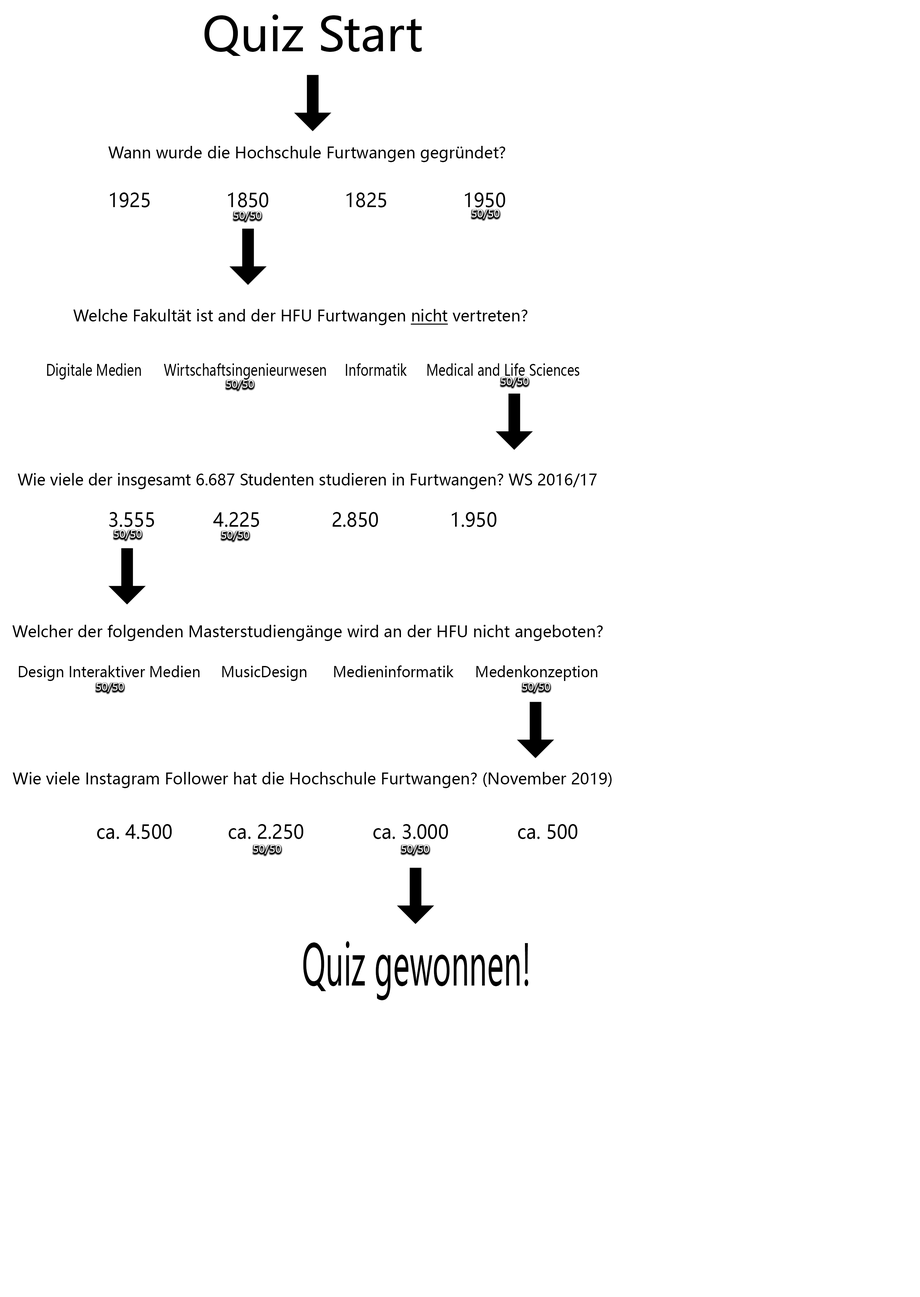
<style>
.page{position:relative;width:920px;height:1297px;background:#ffffff}
.page>*{position:absolute;margin:0}
.t1{font:46.6px "MicrosoftYaHeiUI";color:#000000}
.t2{font:15.6px "MicrosoftYaHeiUI";color:#000000}
.t3{font:19px "MicrosoftYaHeiUI";color:#000000;scale:0.96 1}
.t4{font:10.4px "MicrosoftYaHeiUI";color:#ffffff}
.t5{font:15.6px "MicrosoftYaHeiUI";color:#000000;text-decoration:underline}
.t6{font:15.6px "MicrosoftYaHeiUI";color:#000000;scale:0.81 1}
.t7{font:14.7px "MicrosoftYaHeiUI";color:#000000;scale:0.96 1}
.t8{font:56.3px "MicrosoftYaHeiUI";color:#000000;scale:0.52 1}
</style>
<div class="page">
<p class="t1" style="left:204px;top:14px;width:218px;height:42px">Quiz Start</p>
<p class="t2" style="left:108px;top:146px;width:397px;height:16px">Wann wurde die Hochschule Furtwangen gegründet?</p>
<p class="t3" style="left:110px;top:192px;width:395px;height:15px">1925       1850       1825       1950</p>
<p class="t4" style="left:472px;top:210px;width:27px;height:9px">50/50</p>
<p class="t4" style="left:234px;top:211px;width:27px;height:10px">50/50</p>
<p class="t2" style="left:73px;top:309px;width:454px;height:16px">Welche Fakultät ist and der HFU Furtwangen <span class="t5">nicht</span> vertreten?</p>
<p class="t6" style="left:47px;top:363px;width:532px;height:16px">Digitale Medien   Wirtschaftsingenieurwesen   Informatik   Medical and Life Sciences</p>
<p class="t4" style="left:501px;top:377px;width:27px;height:9px">50/50</p>
<p class="t4" style="left:226px;top:380px;width:28px;height:9px">50/50</p>
<p class="t2" style="left:17px;top:473px;width:580px;height:16px">Wie viele der insgesamt 6.687 Studenten studieren in Furtwangen? WS 2016/17</p>
<p class="t3" style="left:109px;top:512px;width:387px;height:15px">3.555     4.225       2.850       1.950</p>
<p class="t4" style="left:114px;top:530px;width:27px;height:9px">50/50</p>
<p class="t4" style="left:221px;top:531px;width:28px;height:9px">50/50</p>
<p class="t2" style="left:12px;top:625px;width:590px;height:16px">Welcher der folgenden Masterstudiengänge wird an der HFU nicht angeboten?</p>
<p class="t7" style="left:19px;top:665px;width:578px;height:16px">Design Interaktiver Medien   MusicDesign   Medieninformatik   Medenkonzeption</p>
<p class="t4" style="left:96px;top:683px;width:28px;height:9px">50/50</p>
<p class="t4" style="left:522px;top:683px;width:28px;height:9px">50/50</p>
<p class="t2" style="left:12px;top:772px;width:599px;height:16px">Wie viele Instagram Follower hat die Hochschule Furtwangen? (November 2019)</p>
<p class="t3" style="left:97px;top:824px;width:480px;height:15px">ca. 4.500     ca. 2.250       ca. 3.000       ca. 500</p>
<p class="t4" style="left:253px;top:845px;width:28px;height:9px">50/50</p>
<p class="t4" style="left:401px;top:845px;width:28px;height:9px">50/50</p>
<p class="t8" style="left:303px;top:941px;width:225px;height:59px">Quiz gewonnen!</p>
</div>
